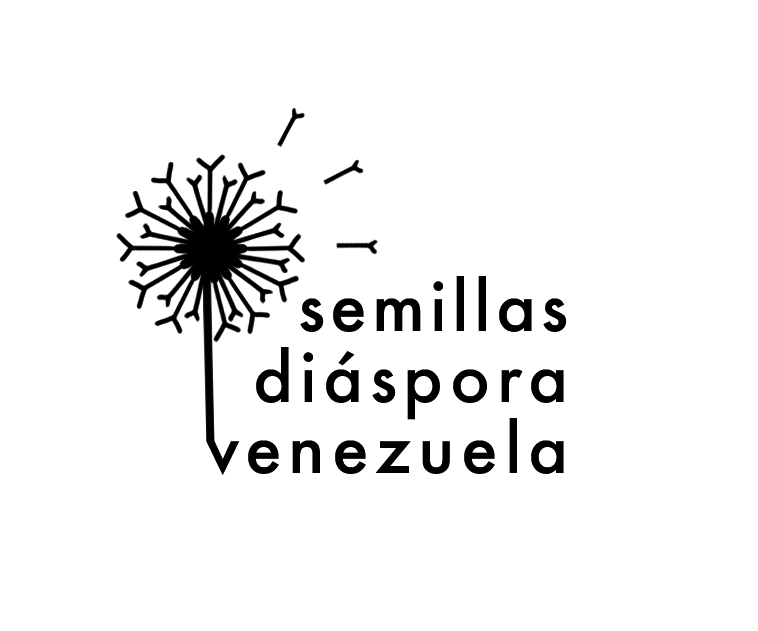
<style>
.page{position:relative;width:758px;height:631px;background:#ffffff}
.page>*{position:absolute;margin:0}
.t1{font:66.7px/70.8px "Futura-Medium";letter-spacing:0.1em;color:#000000}
.t2{font:66.7px/75px "Futura-Medium";letter-spacing:0.15em;color:#000000}
.t3{font:66.7px/70.8px "Futura-Medium";letter-spacing:0.08em;color:#000000}
.t4{font:66.7px/70.8px "Futura-Medium";letter-spacing:0.07em;color:#000000}
</style>
<div class="page">
<p class="t1" style="left:206px;top:276px;width:361px;height:199px;text-align:right"><span class="t2">   </span><span class="t3">semill</span><span class="t4">as<br></span>  diáspora<br>venezuela</p>
<p class="t1" style="left:206px;top:276px;width:361px;height:199px;text-align:right"><span class="t2">   </span><span class="t3">semill</span><span class="t4">as<br></span>  diáspora<br>venezuela</p>
</div>
